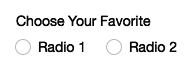
<style>
.page{position:relative;width:192px;height:70px;background:#ffffff}
.page>*{position:absolute;margin:0}
.t1{font:12px "MyriadPro-Regular";color:#0a0a0a}
</style>
<div class="page">
<p class="t1" style="left:16px;top:15px;width:135px;height:12px">Choose Your Favorite</p>
<p class="t1" style="left:38px;top:41px;width:46px;height:12px">Radio 1</p>
<p class="t1" style="left:129px;top:41px;width:48px;height:12px">Radio 2</p>
</div>
